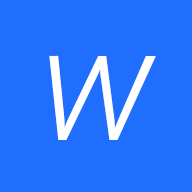
<style>
.page{position:relative;width:192px;height:192px;background:#1f6efd}
.page>*{position:absolute;margin:0}
.t1{font:158.8px "Roboto-LightItalic";color:#ffffff}
</style>
<div class="page">
<p class="t1" style="left:49px;top:55px;width:107px;height:85px">w</p>
</div>
